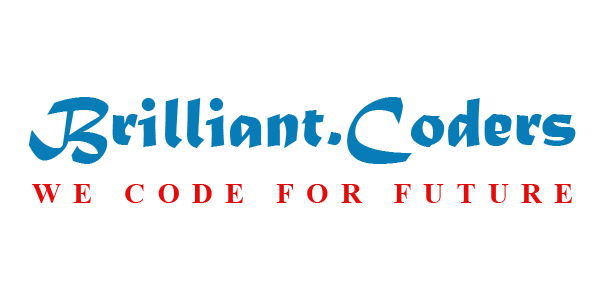
<style>
.page{position:relative;width:600px;height:300px;background:#ffffff}
.page>*{position:absolute;margin:0}
.t1{font:74px "MaturaMTScriptCapitals";color:#077cb7}
.t2{font:29px "TimesNewRomanPS-BoldMT";letter-spacing:0.42em;color:#e60a0a}
</style>
<div class="page">
<p class="t1" style="left:29px;top:97px;width:547px;height:67px">Brilliant.Coders</p>
<p class="t2" style="left:32px;top:184px;width:540px;height:19px">WE CODE FOR FUTURE</p>
</div>
